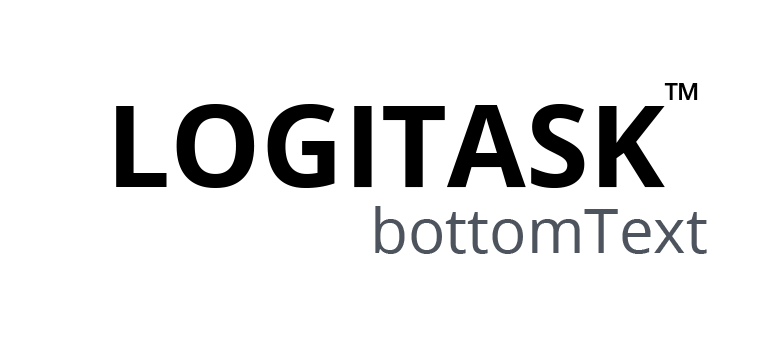
<style>
.page{position:relative;width:780px;height:337px;background:#ffffff}
.page>*{position:absolute;margin:0}
.t1{font:48px "OpenSans-Regular";color:#000000}
.t2{font:114px "OpenSans-Bold";color:#000000}
.t3{font:62px "OpenSans-Regular";color:#4d545d}
</style>
<div class="page">
<p class="t1" style="left:664px;top:83px;width:34px;height:17px">™</p>
<p class="t2" style="left:116px;top:104px;width:549px;height:84px">LOGITASK</p>
<p class="t3" style="left:375px;top:206px;width:332px;height:48px">bottomText</p>
</div>
